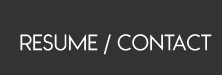
<style>
.page{position:relative;width:222px;height:75px;background:#333333}
.page>*{position:absolute;margin:0}
.t1{font:21.3px "WatchwordRegularDemo";color:#ffffff}
</style>
<div class="page">
<p class="t1" style="left:20px;top:34px;width:192px;height:21px">RESUME / CONTACT</p>
</div>
